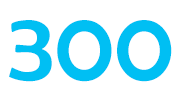
<style>
.page{position:relative;width:180px;height:100px;background:#ffffff}
.page>*{position:absolute;margin:0}
.t1{font:100px "BerlinSansFB-Reg";color:#00bff3}
</style>
<div class="page">
<p class="t1" style="left:9px;top:20px;width:163px;height:62px">300</p>
</div>
